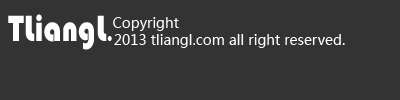
<style>
.page{position:relative;width:400px;height:100px;background:#333333}
.page>*{position:absolute;margin:0}
.t1{font:37.7px "STHupo";color:#ffffff;scale:0.82 1}
.t2{font:37.7px "MicrosoftYaHei";color:#ffffff;scale:0.82 1}
.t3{font:14px "MicrosoftYaHei";color:#ffffff}
</style>
<div class="page">
<p class="t1" style="left:8px;top:14px;width:104px;height:36px">TLiangL<span class="t2">.</span></p>
<p class="t3" style="left:113px;top:17px;width:66px;height:14px">Copyright</p>
<p class="t3" style="left:114px;top:34px;width:231px;height:14px">2013 tliangl.com all right reserved.</p>
</div>
